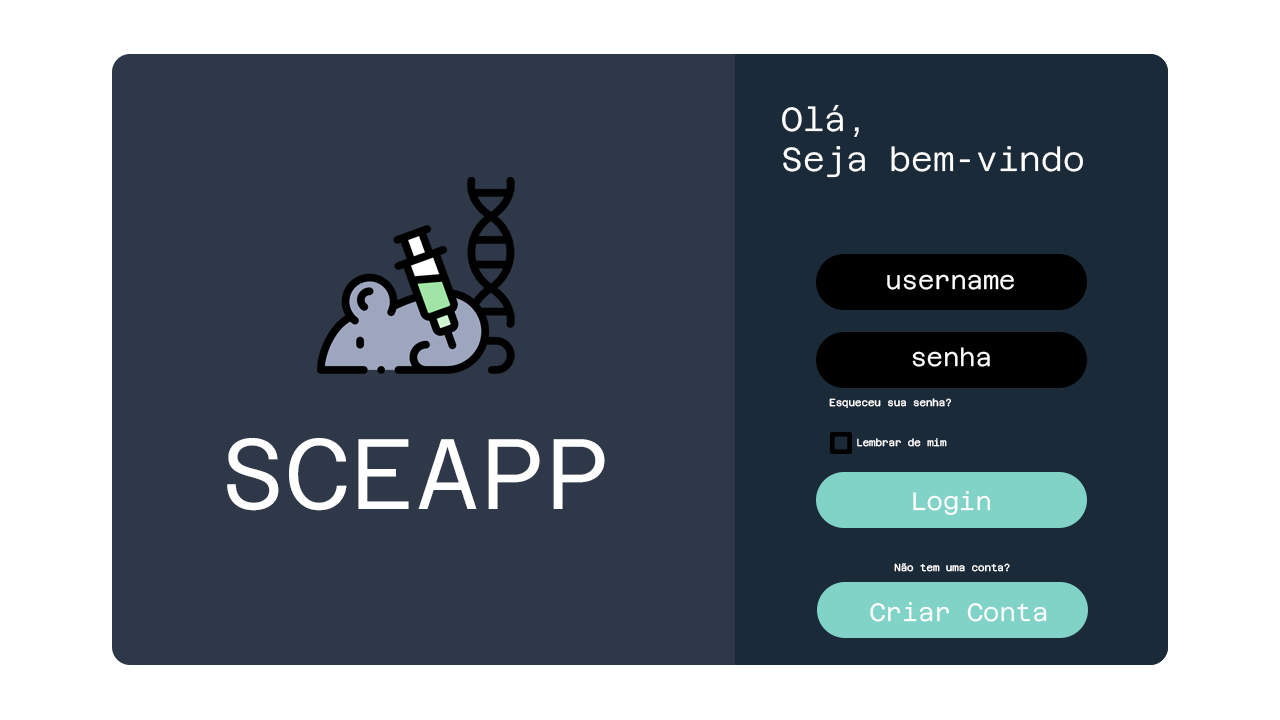
<style>
.page{position:relative;width:1280px;height:720px;background:#2f3848}
.page>*{position:absolute;margin:0}
.t1{font:33.3px "AzeretMonoRoman-Light";color:#ffffff}
.t2{font:25px "AzeretMonoRoman-Light";color:#ffffff}
.t3{font:9.9px "AzeretMonoRoman-Light";color:#ffffff}
.t4{font:100px "AzeretMonoRoman-Light";color:#ffffff}
</style>
<div class="page">
<p class="t1" style="left:782px;top:104px;width:301px;height:74px">Olá,<br>Seja bem-vindo</p>
<p class="t2" style="left:887px;top:274px;width:127px;height:16px">username</p>
<p class="t2" style="left:912px;top:347px;width:78px;height:20px">senha</p>
<p class="t3" style="left:829px;top:398px;width:122px;height:10px">Esqueceu sua senha?</p>
<p class="t4" style="left:227px;top:438px;width:378px;height:73px">SCEAPP</p>
<p class="t3" style="left:857px;top:438px;width:90px;height:9px">Lembrar de mim</p>
<p class="t2" style="left:913px;top:491px;width:77px;height:24px">Login</p>
<p class="t3" style="left:894px;top:563px;width:116px;height:9px">Não tem uma conta?</p>
<p class="t2" style="left:870px;top:602px;width:177px;height:20px">Criar Conta</p>
</div>
